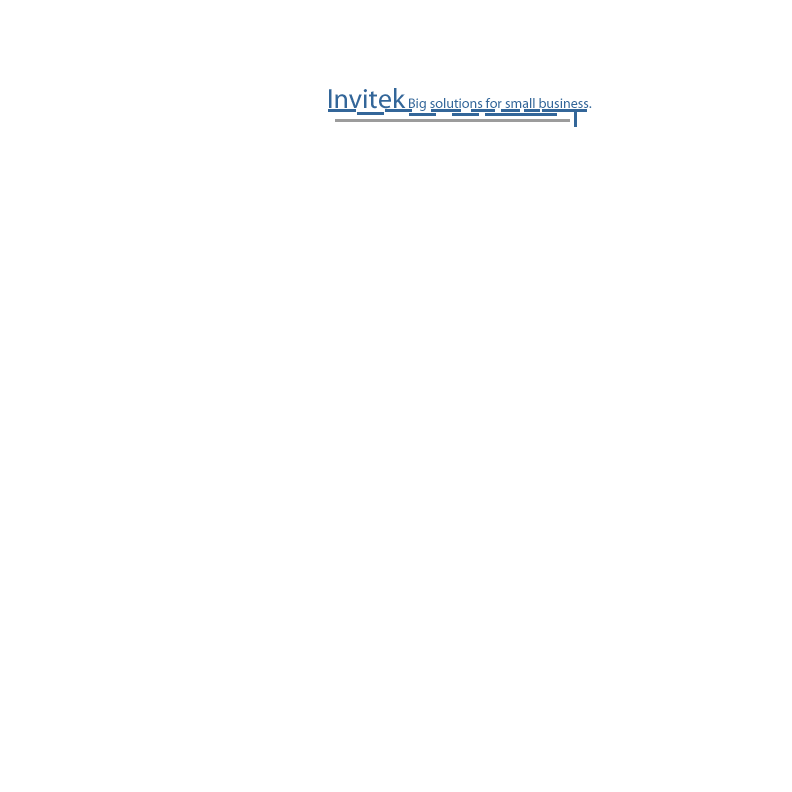
<style>
.page{position:relative;width:792px;height:792px;background:#ffffff}
.page>*{position:absolute;margin:0}
.t1{font:28px "Myriad-Roman";color:#336699}
.t2{font:14px "Myriad-Roman";color:#336699}
</style>
<div class="page">
<p class="t1" style="left:329px;top:88px;width:77px;height:21px">Invitek</p>
<p class="t2" style="left:409px;top:98px;width:183px;height:13px">Big solutions for small business.</p>
</div>
